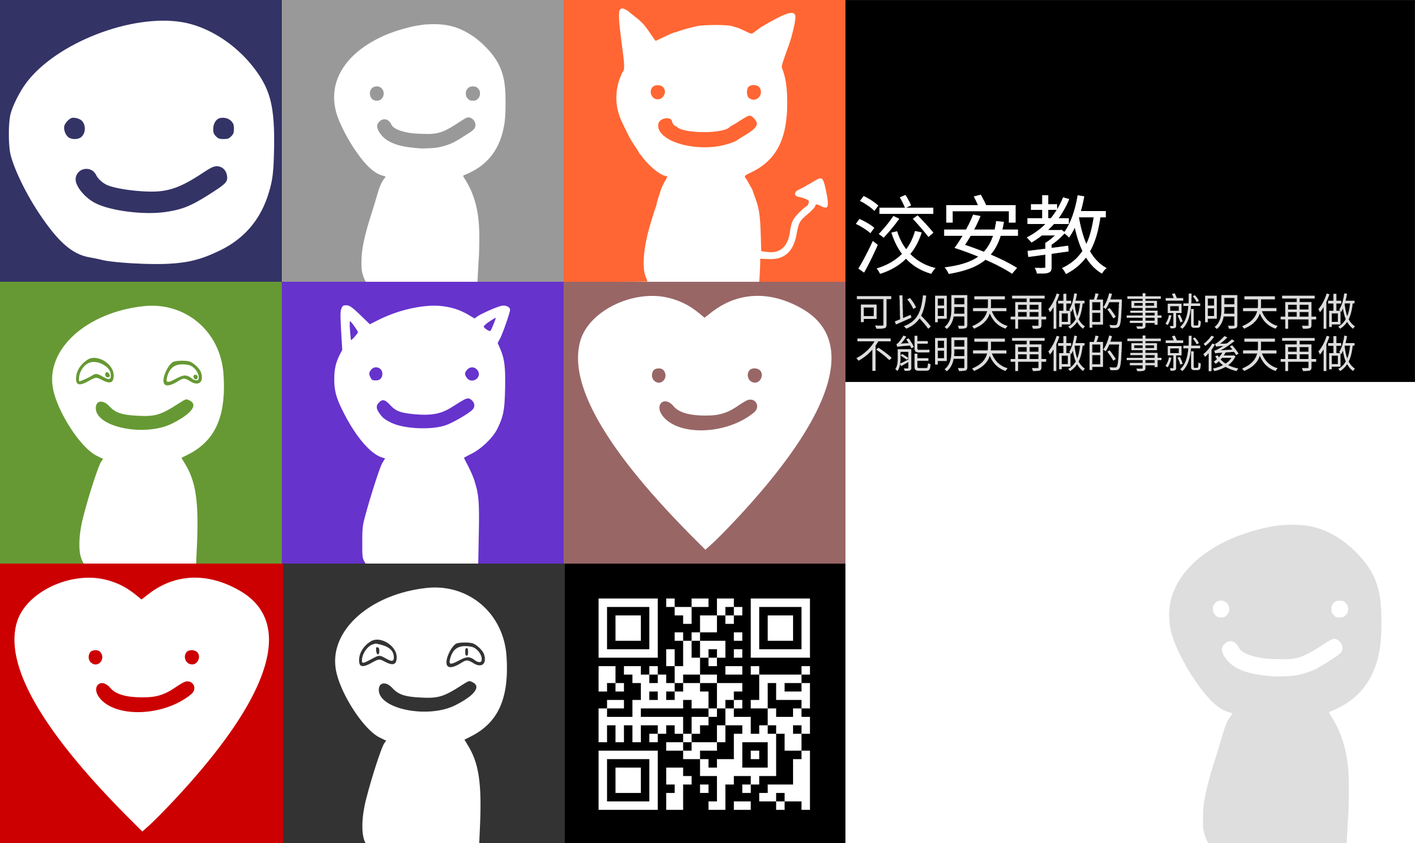
<style>
.page{position:relative;width:1415px;height:843px;background:#ffffff}
.page>*{position:absolute;margin:0}
.t1{font:85.6px "SourceHanSansTWHK-Regular";color:#ffffff}
.t2{font:38.6px/42.2px "SourceHanSansTWHK-Regular";color:#dddddd}
</style>
<div class="page">
<p class="t1" style="left:856px;top:195px;width:250px;height:79px">洨安教</p>
<p class="t2" style="left:856px;top:293px;width:499px;height:78px">可以明天再做的事就明天再做<br>不能明天再做的事就後天再做</p>
</div>
